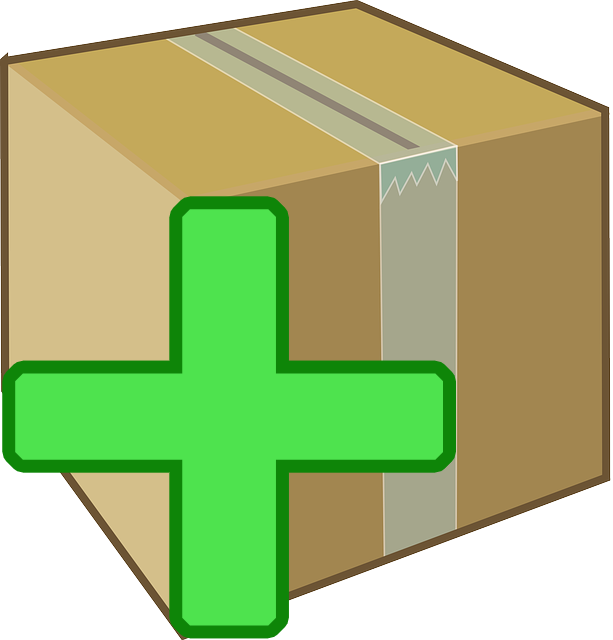
<style>
.page{position:relative;width:613px;height:640px;background:#a28650}
.page>*{position:absolute;margin:0}
.t1{font:753.4px "MyriadPro-Bold";color:#4ee34e;font-weight:bold;scale:1.06 1}
</style>
<div class="page">
<p class="t1" style="left:15px;top:209px;width:428px;height:417px">+</p>
</div>
